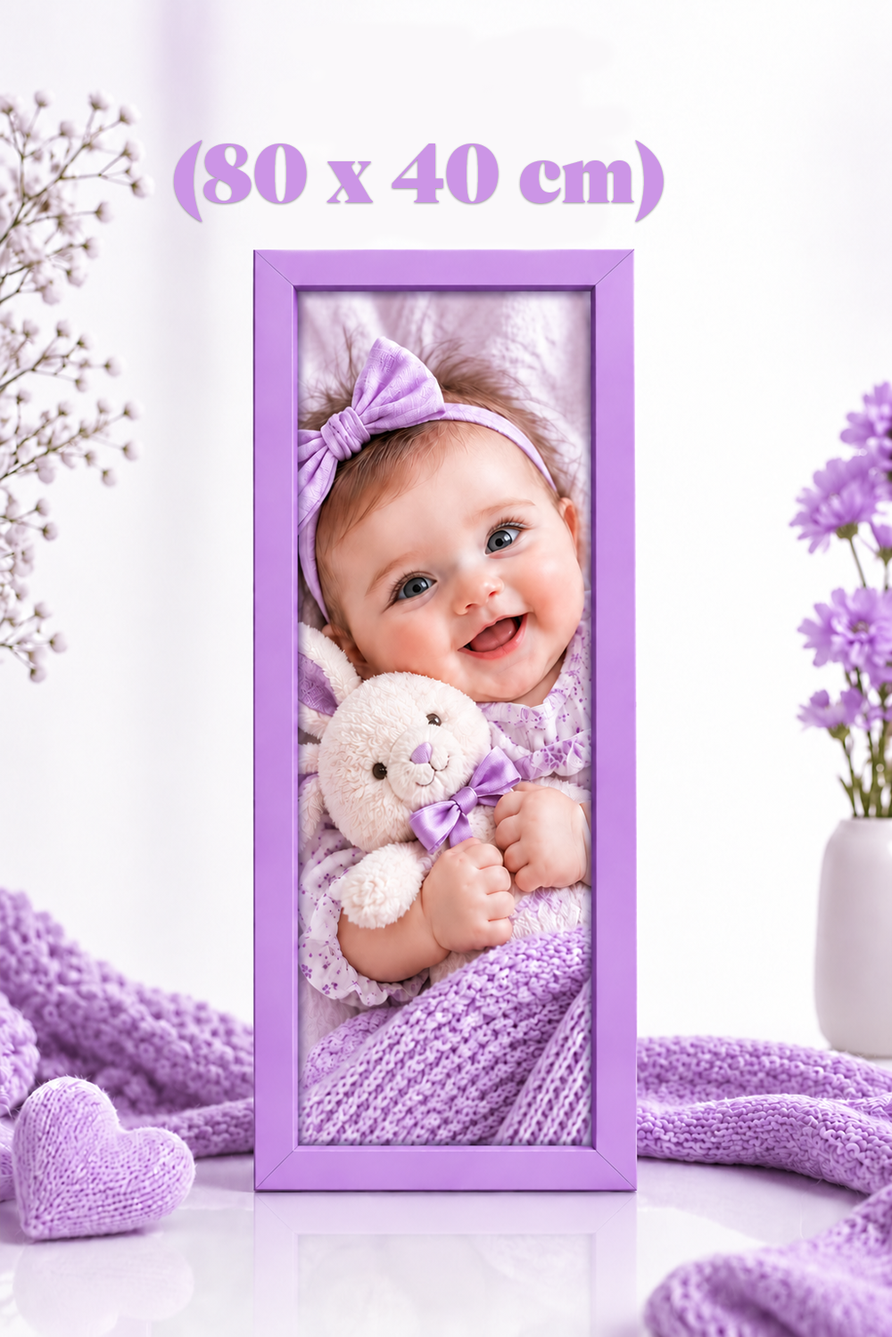
<style>
.page{position:relative;width:892px;height:1337px}
.page>*{position:absolute;margin:0}
.t1{font:85.6px "CotfordDisplay-XBold";color:#cc95e6}
</style>
<div class="page">
<p class="t1" style="left:174px;top:140px;width:489px;height:82px">(80 x 40 cm)</p>
</div>
